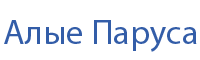
<style>
.page{position:relative;width:200px;height:60px;background:#ffffff}
.page>*{position:absolute;margin:0}
.t1{font:35px "MyriadPro-Regular";color:#335da8}
</style>
<div class="page">
<p class="t1" style="left:4px;top:20px;width:193px;height:32px">Алые Паруса</p>
</div>
